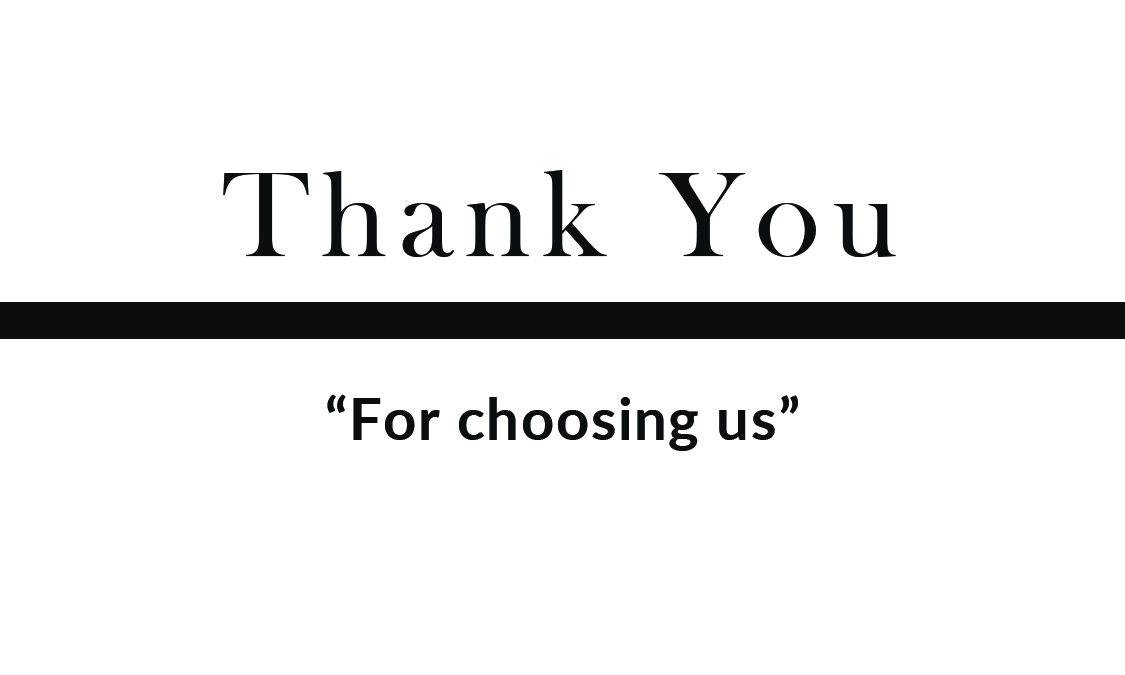
<style>
.page{position:relative;width:1125px;height:675px;background:#ffffff}
.page>*{position:absolute;margin:0}
.t1{font:125px "BaskOldFace";letter-spacing:0.1em;color:#0b0e0f}
.t2{font:58.3px "Lato-Bold";letter-spacing:0.025em;color:#0b0e0f}
</style>
<div class="page">
<p class="t1" style="left:223px;top:170px;width:673px;height:87px">Thank You</p>
<p class="t2" style="left:327px;top:394px;width:471px;height:57px">“For choosing us”</p>
</div>
